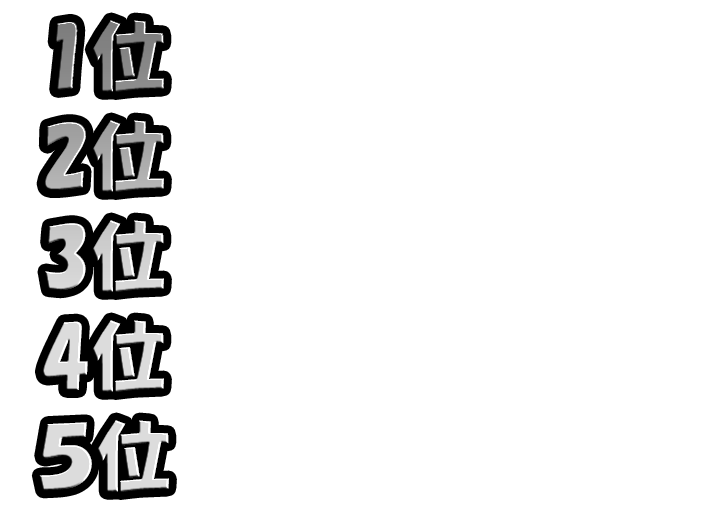
<style>
.page{position:relative;width:710px;height:512px;background:#ffffff}
.page>*{position:absolute;margin:0}
.t1{font:75px/100px "HGPSoeiKakupoptai";letter-spacing:0.02em}
</style>
<div class="page">
<p class="t1" style="left:39px;top:20px;width:130px;height:472px;text-align:center">1位<br>2位<br>3位<br>4位<br>５位</p>
</div>
